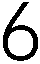
<style>
.page{position:relative;width:40px;height:64px;background:#ffffff}
.page>*{position:absolute;margin:0}
.t1{font:74px "OPPOSans-R";color:#000000}
</style>
<div class="page">
<p class="t1" style="left:3px;top:2px;width:35px;height:59px">6</p>
</div>
